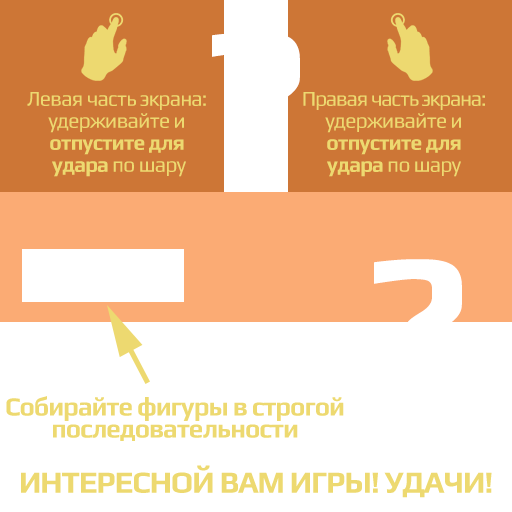
<style>
.page{position:relative;width:512px;height:512px;background:#ffffff}
.page>*{position:absolute;margin:0}
.t1{font:194.9px "Play-Bold";letter-spacing:-0.04em;color:#ffffff}
.t2{font:21px/22px "Play-Regular";letter-spacing:-0.04em;color:#edd970}
.t3{font:21px/22px "Play-Bold";letter-spacing:-0.04em;color:#edd970}
.t4{font:21px/22px "Play-Regular";letter-spacing:-0.06em;color:#edd970}
.t5{font:26px/22px "Play-Bold";letter-spacing:-0.04em;color:#edd970}
.t6{font:31px "Play-Bold";letter-spacing:-0.04em;color:#edd970}
</style>
<div class="page">
<p class="t1" style="left:212px;top:32px;width:88px;height:129px">?</p>
<p class="t2" style="left:27px;top:92px;width:179px;height:85px;text-align:center">Левая часть экрана: удерживайте и <span class="t3">отпустите для<br> удара </span>по шару</p>
<p class="t4" style="left:303px;top:92px;width:182px;height:85px;text-align:center">Правая часть экрана:<span class="t2"> удерживайте и<br></span><span class="t3">отпустите для <br>удара </span><span class="t2">по шару</span></p>
<p class="t1" style="left:374px;top:259px;width:88px;height:129px">?</p>
<p class="t5" style="left:6px;top:396px;width:338px;height:45px;text-align:center">Собирайте фигуры в строгой последовательности</p>
<p class="t6" style="left:21px;top:465px;width:471px;height:33px">ИНТЕРЕСНОЙ ВАМ ИГРЫ! УДАЧИ!</p>
</div>
